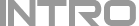
<style>
.page{position:relative;width:139px;height:26px;background:#999999}
.page>*{position:absolute;margin:0}
.t1{font:50px "Bitsumishi";color:#999999}
</style>
<div class="page">
<p class="t1" style="left:0px;top:0px;width:136px;height:26px">Intro</p>
</div>
